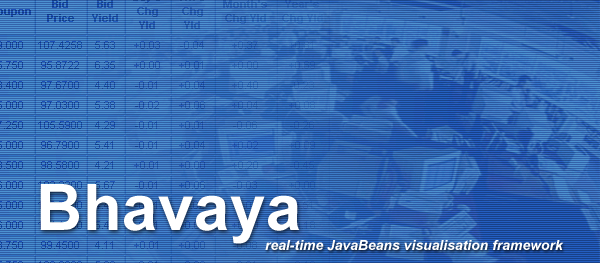
<style>
.page{position:relative;width:600px;height:263px}
.page>*{position:absolute;margin:0}
.t1{font:64px "Arial-BoldMT";letter-spacing:0.005em;color:#ffffff}
.t2{font:13.8px "Arial-BoldItalicMT";letter-spacing:0.005em;color:#ffffff}
</style>
<div class="page">
<p class="t1" style="left:40px;top:184px;width:260px;height:60px">Bhavaya</p>
<p class="t2" style="left:265px;top:240px;width:299px;height:11px">real-time JavaBeans visualisation framework</p>
</div>
